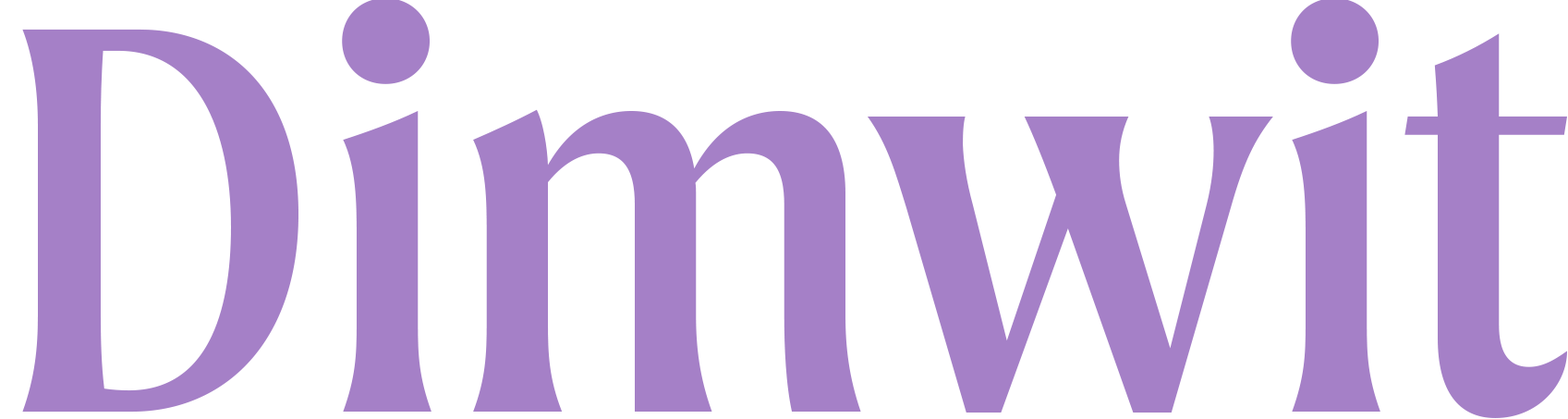
<style>
.page{position:relative;width:1568px;height:419px;background:#ffffff}
.page>*{position:absolute;margin:0}
.t1{font:587.5px "Moret-Regular";color:#a580c7}
</style>
<div class="page">
<p class="t1" style="left:22px;top:0px;width:1545px;height:418px">Dimwit</p>
</div>
